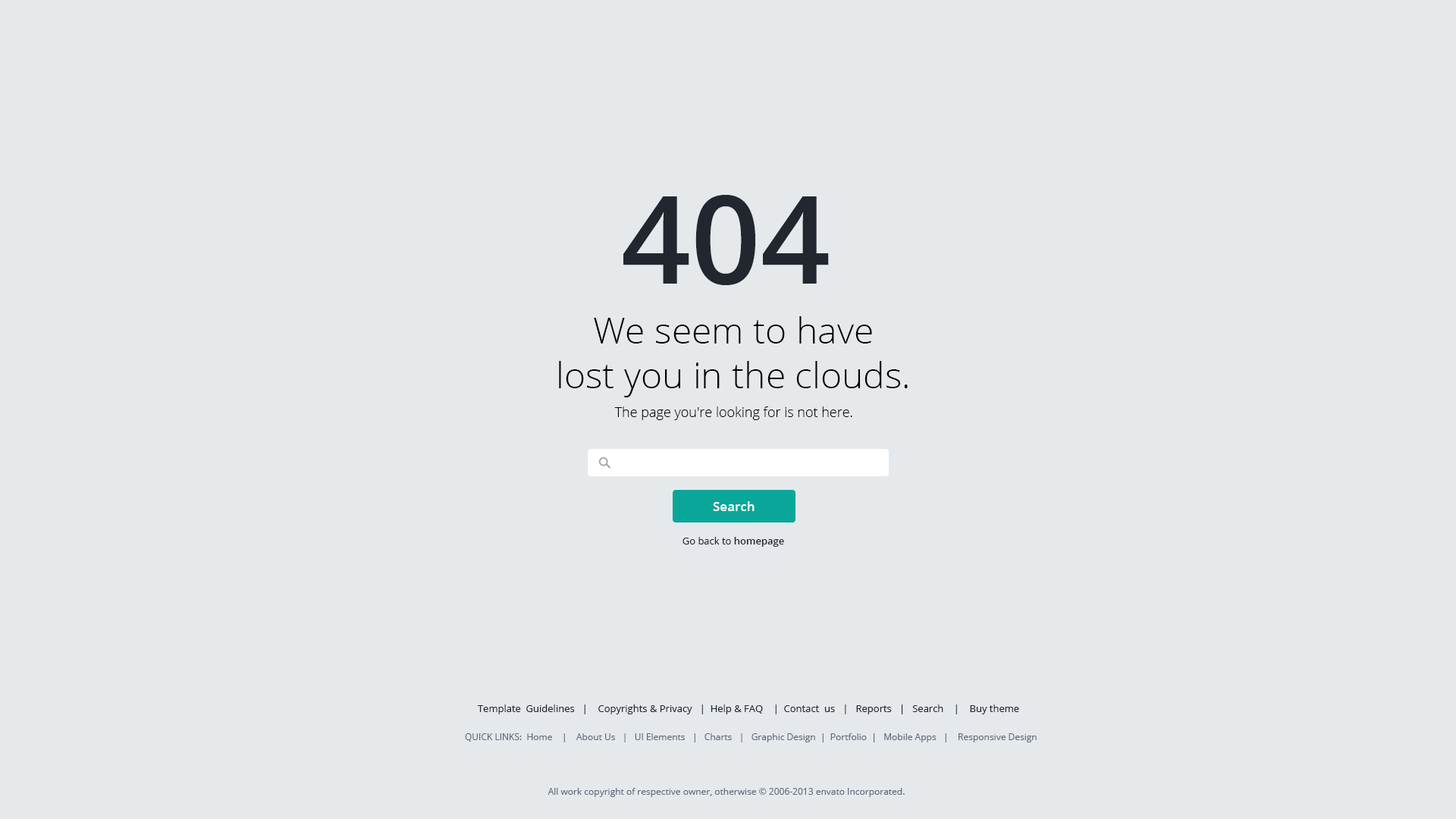
<style>
.page{position:relative;width:1456px;height:819px;background:#e5e9ec}
.page>*{position:absolute;margin:0}
.t1{font:122.4px "OpenSans-Semibold";color:#22262e}
.t2{font:36.4px/44.7px "OpenSans-Light";color:#000000}
.t3{font:13.6px "OpenSans-Light";color:#000000}
.t4{font:12.9px "OpenSans-Semibold";color:#ffffff}
.t5{font:9.9px "OpenSans";color:#22262e}
.t6{font:9.9px "OpenSans-Semibold";color:#22262e}
.t7{font:9.1px "OpenSans";color:#616a7b}
</style>
<div class="page">
<p class="t1" style="left:623px;top:195px;width:206px;height:90px">404</p>
<p class="t2" style="left:559px;top:316px;width:349px;height:81px;text-align:center">We seem to have <br>lost you in the clouds.</p>
<p class="t3" style="left:614px;top:406px;width:238px;height:14px">The page you're looking for is not here.</p>
<p class="t4" style="left:713px;top:501px;width:42px;height:10px">Search</p>
<p class="t5" style="left:682px;top:537px;width:102px;height:10px">Go back to <span class="t6">homepage</span></p>
<p class="t5" style="left:478px;top:704px;width:541px;height:10px">Template  Guidelines   |    Copyrights &amp; Privacy   |  Help &amp; FAQ    |  Contact  us   |   Reports   |   Search    |    Buy theme</p>
<p class="t7" style="left:465px;top:733px;width:572px;height:9px">QUICK LINKS:  Home    |    About Us   |   UI Elements   |   Charts   |   Graphic Design  |  Portfolio  |   Mobile Apps   |    Responsive Design</p>
<p class="t7" style="left:548px;top:788px;width:357px;height:9px">All work copyright of respective owner, otherwise © 2006-2013 envato Incorporated.</p>
</div>
